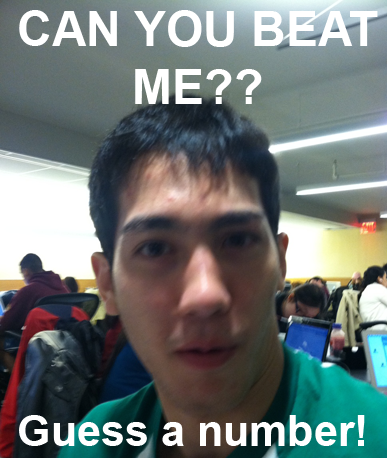
<style>
.page{position:relative;width:387px;height:458px}
.page>*{position:absolute;margin:0}
.t1{font:48px "Arial-BoldMT";color:#ffffff}
.t2{font:43px "Arial-BoldMT";color:#ffffff}
</style>
<div class="page">
<p class="t1" style="left:19px;top:10px;width:359px;height:94px;text-align:center">CAN YOU BEAT ME??</p>
<p class="t2" style="left:19px;top:415px;width:346px;height:31px">Guess a number!</p>
</div>
